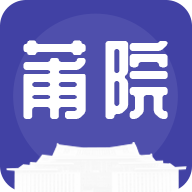
<style>
.page{position:relative;width:192px;height:192px;background:#4f4fac}
.page>*{position:absolute;margin:0}
.t1{font:84.7px "WD-XLLubrifontSC-Regular";letter-spacing:0.12em;color:#ffffff;scale:1.1 1}
</style>
<div class="page">
<p class="t1" style="left:23px;top:40px;width:145px;height:79px">莆院</p>
</div>
